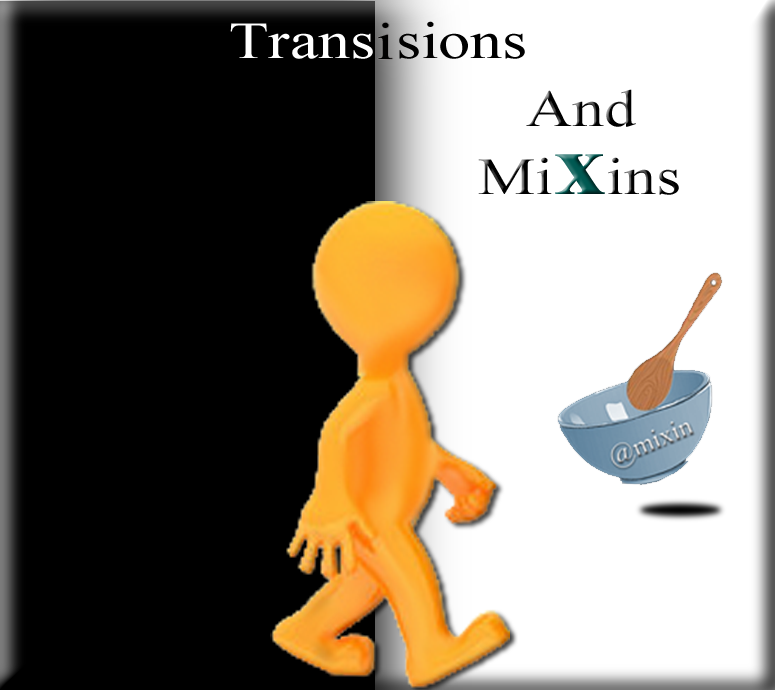
<style>
.page{position:relative;width:775px;height:690px;background:#000000}
.page>*{position:absolute;margin:0}
.t1{font:52px "TimesNewRomanPSMT";color:#ffffff;scale:1.23 1}
.t2{font:52px "TimesNewRomanPSMT";color:#000000;scale:1.23 1}
.t3{font:52px "TimesNewRomanPSMT";scale:1.23 1}
.t4{font:87px "TimesNewRomanPS-BoldMT";scale:1.23 1}
</style>
<div class="page">
<p class="t1" style="left:230px;top:23px;width:143px;height:36px">Trans</p>
<p class="t2" style="left:378px;top:22px;width:15px;height:37px">i</p>
<p class="t2" style="left:399px;top:21px;width:126px;height:38px">sions</p>
<p class="t2" style="left:526px;top:89px;width:110px;height:38px">And</p>
<p class="t3" style="left:478px;top:154px;width:201px;height:41px">Mi<span class="t4">x</span>ins</p>
</div>
